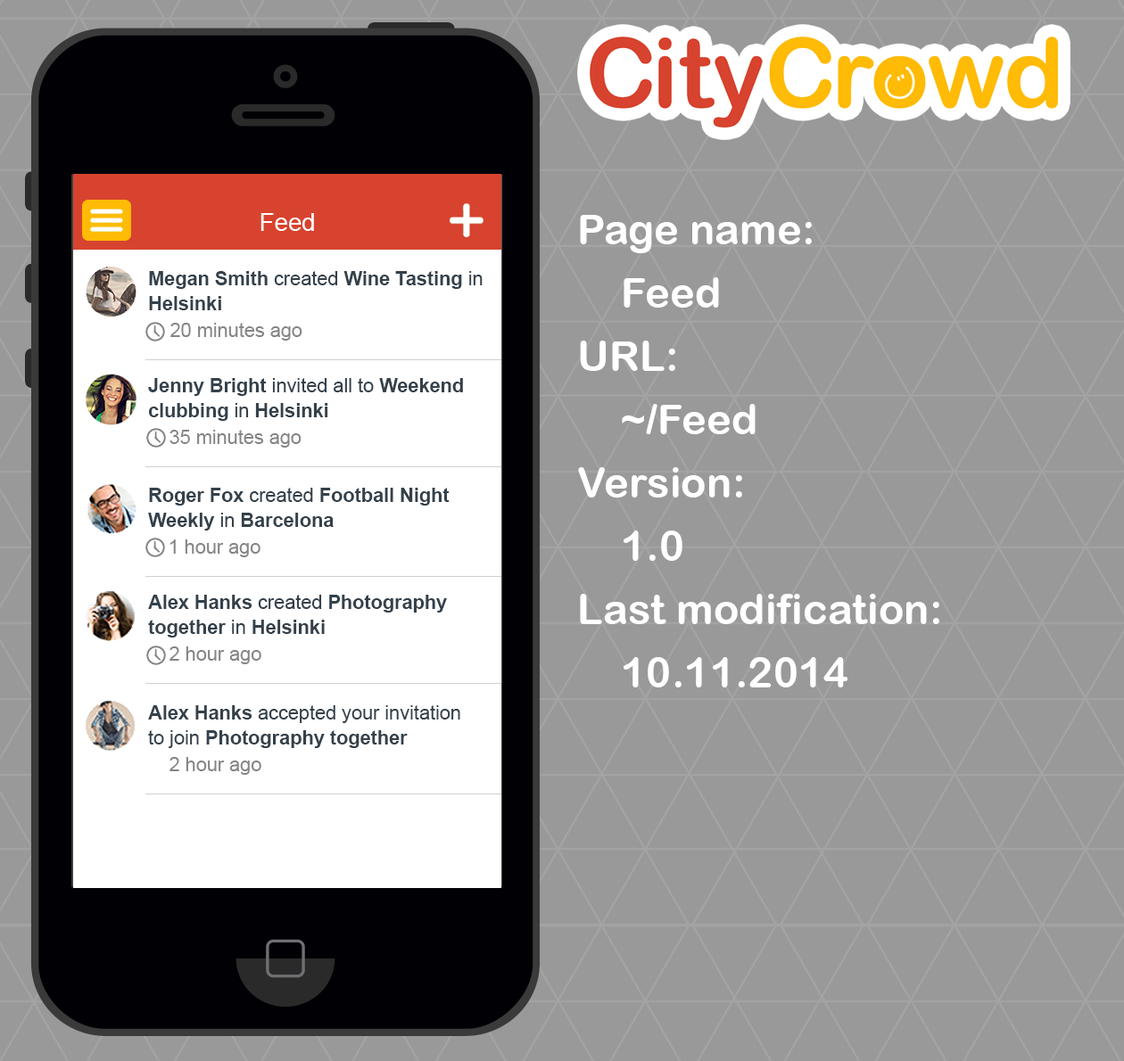
<style>
.page{position:relative;width:1124px;height:1061px;background:#999999}
.page>*{position:absolute;margin:0}
.t1{font:24.6px "ArialMT";color:#ffffff}
.t2{font:42.2px/63.3px "ArialRoundedMTBold";color:#ffffff}
.t3{font:19.3px/24.6px "Arial-BoldMT";color:#34414b}
.t4{font:19.3px/24.6px "ArialMT";color:#34414b}
.t5{font:19.3px "ArialMT";color:#858585}
</style>
<div class="page">
<p class="t1" style="left:260px;top:213px;width:54px;height:18px">Feed</p>
<p class="t2" style="left:578px;top:215px;width:361px;height:473px">Page name:<br>Feed<br>URL:<br>~/Feed<br>Version:<br>1.0<br>Last modification:<br>10.11.2014</p>
<p class="t3" style="left:149px;top:271px;width:333px;height:39px">Megan Smith <span class="t4">created </span>Wine Tasting <span class="t4">in<br></span>Helsinki</p>
<p class="t5" style="left:170px;top:323px;width:132px;height:18px">20 minutes ago</p>
<p class="t3" style="left:148px;top:378px;width:315px;height:43px">Jenny Bright<span class="t4"> invited all to </span>Weekend <br>clubbing <span class="t4">in </span>Helsinki</p>
<p class="t5" style="left:169px;top:430px;width:132px;height:18px">35 minutes ago</p>
<p class="t3" style="left:148px;top:488px;width:301px;height:43px">Roger Fox<span class="t4"> created </span>Football Night <br>Weekly <span class="t4">in </span>Barcelona</p>
<p class="t5" style="left:169px;top:540px;width:91px;height:17px">1 hour ago</p>
<p class="t3" style="left:148px;top:595px;width:299px;height:43px">Alex Hanks<span class="t4"> created </span>Photography <br>together <span class="t4">in </span>Helsinki</p>
<p class="t5" style="left:169px;top:647px;width:92px;height:17px">2 hour ago</p>
<p class="t4" style="left:148px;top:705px;width:312px;height:43px"><span class="t3">Alex Hanks</span> accepted your invitation <br>to join <span class="t3">Photography together</span></p>
<p class="t5" style="left:169px;top:757px;width:92px;height:18px">2 hour ago</p>
</div>
